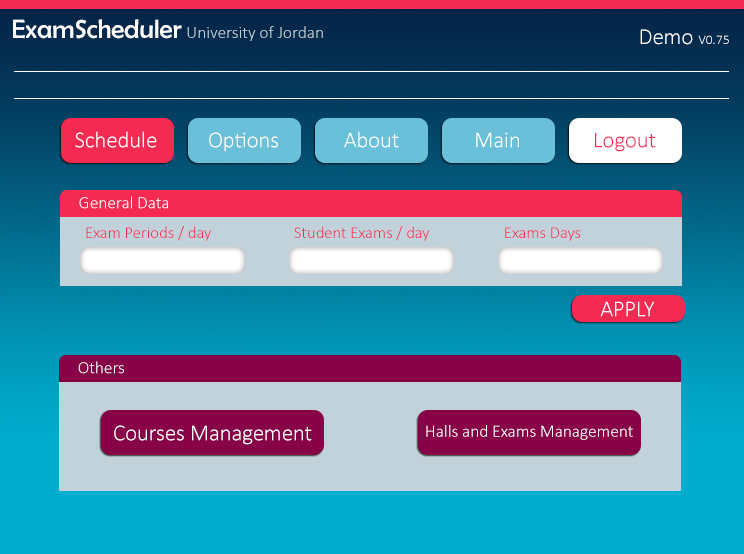
<style>
.page{position:relative;width:744px;height:554px}
.page>*{position:absolute;margin:0}
.t1{font:26.7px "BerlinSansFB-Reg";color:#fefefe}
.t2{font:17.3px "Calibri-Light";color:#c2d2da}
.t3{font:13.3px "Calibri-Light";color:#fefefe}
.t4{font:22.7px "Calibri-Light";color:#fefefe}
.t5{font:22.7px "Calibri-Light";color:#f52a53}
.t6{font:17.3px "Calibri-Light";color:#ffffff}
.t7{font:16.7px "Calibri-Light";color:#f52a53}
.t8{font:22.7px "Calibri-Light";color:#ffffff}
</style>
<div class="page">
<p class="t1" style="left:13px;top:19px;width:169px;height:20px">ExamScheduler</p>
<p class="t2" style="left:187px;top:26px;width:136px;height:15px">University of Jordan</p>
<p class="t3" style="left:640px;top:29px;width:89px;height:16px"><span class="t4">Demo </span>V0.75</p>
<p class="t4" style="left:75px;top:131px;width:82px;height:17px">Schedule</p>
<p class="t4" style="left:209px;top:132px;width:69px;height:20px">Options</p>
<p class="t4" style="left:344px;top:131px;width:55px;height:17px">About</p>
<p class="t4" style="left:476px;top:132px;width:43px;height:16px">Main</p>
<p class="t5" style="left:595px;top:132px;width:61px;height:20px">Logout</p>
<p class="t6" style="left:79px;top:196px;width:89px;height:13px">General Data</p>
<p class="t7" style="left:86px;top:226px;width:125px;height:15px">Exam Periods / day</p>
<p class="t7" style="left:294px;top:226px;width:136px;height:15px">Student Exams / day</p>
<p class="t7" style="left:505px;top:227px;width:76px;height:14px">Exams Days</p>
<p class="t4" style="left:600px;top:301px;width:54px;height:16px">APPLY</p>
<p class="t6" style="left:78px;top:361px;width:46px;height:13px">Others</p>
<p class="t8" style="left:114px;top:425px;width:198px;height:20px">Courses Management</p>
<p class="t6" style="left:426px;top:425px;width:207px;height:15px">Halls and Exams Management</p>
</div>
